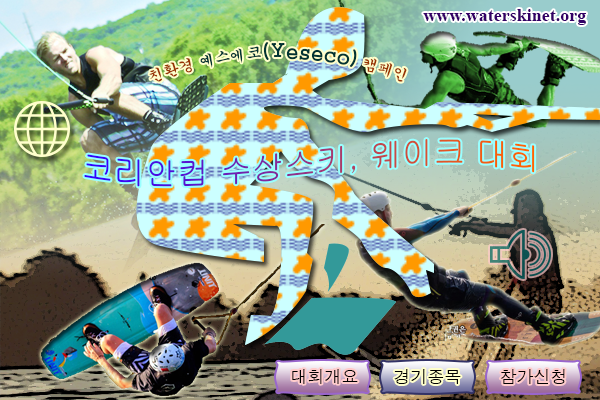
<style>
.page{position:relative;width:600px;height:400px}
.page>*{position:absolute;margin:0}
.t1{font:18px "TimesNewRomanPS-BoldMT";color:#330066}
.t2{font:20px "Gungsuh";color:#003333}
.t3{font:15px "Gungsuh";color:#993300}
.t4{font:15px "Gungsuh";color:#003333}
.t5{font:32px "Gulim"}
.t6{font:17px "Dotum";color:#000000}
</style>
<div class="page">
<p class="t1" style="left:423px;top:9px;width:163px;height:16px">www.waterskinet.org</p>
<p class="t2" style="left:149px;top:42px;width:258px;height:40px;text-align:center"><span class="t3">친환경 </span><span class="t4">예스에코</span>(Yeseco) <span class="t3">캠페인</span></p>
<p class="t5" style="left:84px;top:139px;width:451px;height:48px">코리안컵 수상스키, 웨이크 대회</p>
<p class="t6" style="left:292px;top:369px;width:66px;height:15px">대회개요</p>
<p class="t6" style="left:394px;top:369px;width:67px;height:15px">경기종목</p>
<p class="t6" style="left:500px;top:369px;width:65px;height:15px">참가신청</p>
</div>
